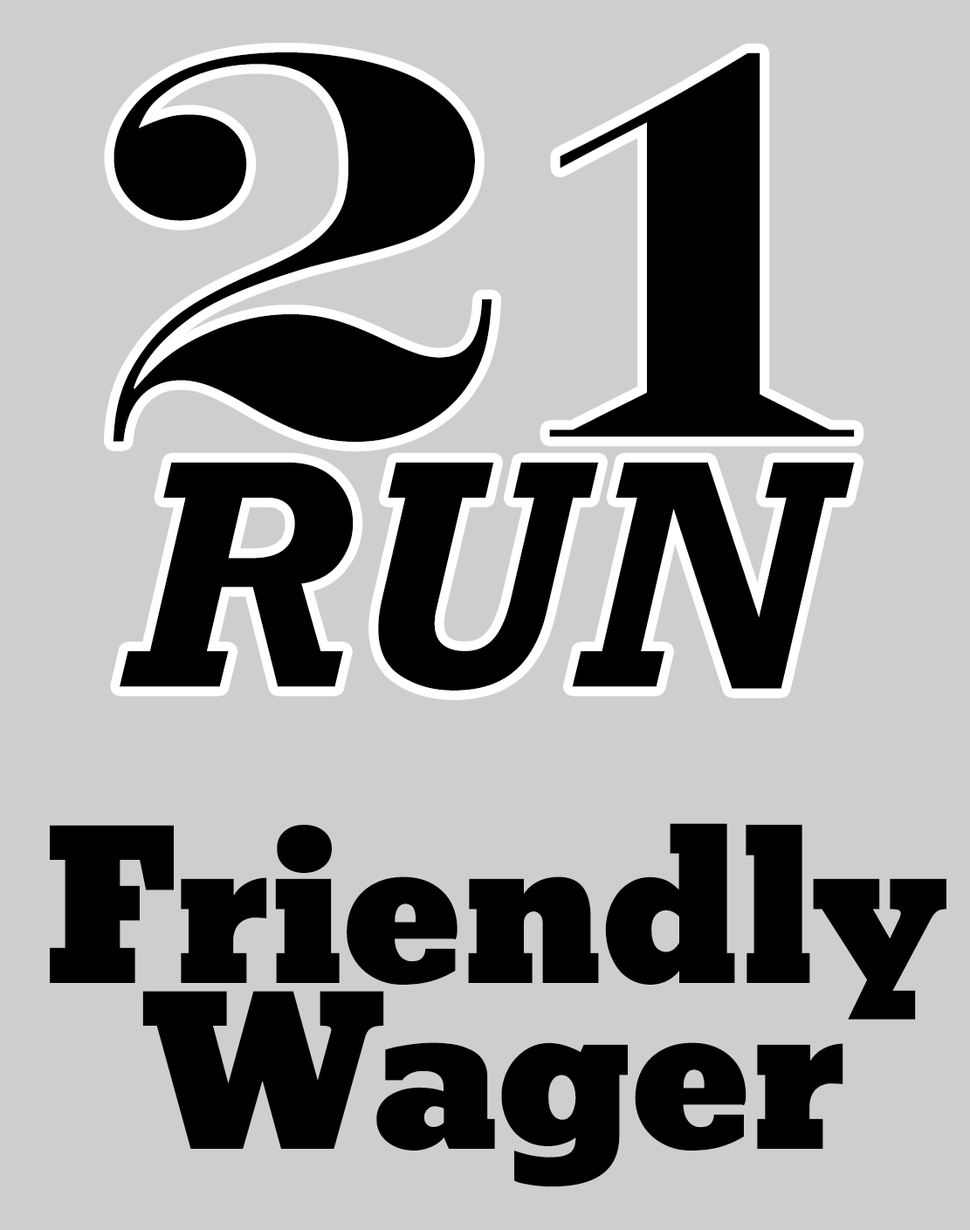
<style>
.page{position:relative;width:970px;height:1230px;background:#cecece}
.page>*{position:absolute;margin:0}
.t1{font:554.8px "EngraversMT-Bold";color:#000000}
.t2{font:329.7px "Rockwell-BoldItalic";color:#000000}
.t3{font:198.7px "Bevan";letter-spacing:-0.01em;color:#000000}
</style>
<div class="page">
<p class="t1" style="left:113px;top:52px;width:741px;height:390px">21</p>
<p class="t2" style="left:120px;top:462px;width:734px;height:228px">RUN</p>
<p class="t3" style="left:50px;top:823px;width:896px;height:196px">Friendly</p>
<p class="t3" style="left:142px;top:991px;width:701px;height:196px">Wager</p>
</div>
